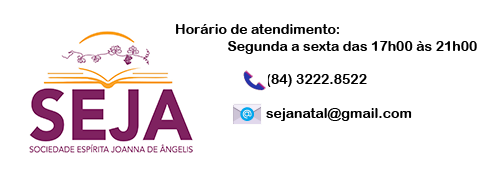
<style>
.page{position:relative;width:500px;height:188px;background:#ffffff}
.page>*{position:absolute;margin:0}
.t1{font:14px "ArialRoundedMTBold";color:#000000}
</style>
<div class="page">
<p class="t1" style="left:176px;top:24px;width:301px;height:97px">Horário de atendimento: <br>               Segunda a sexta das 17h00 às 21h00<br><br>                          (84) 3222.8522<br><br>                          sejanatal@gmail.com</p>
</div>
